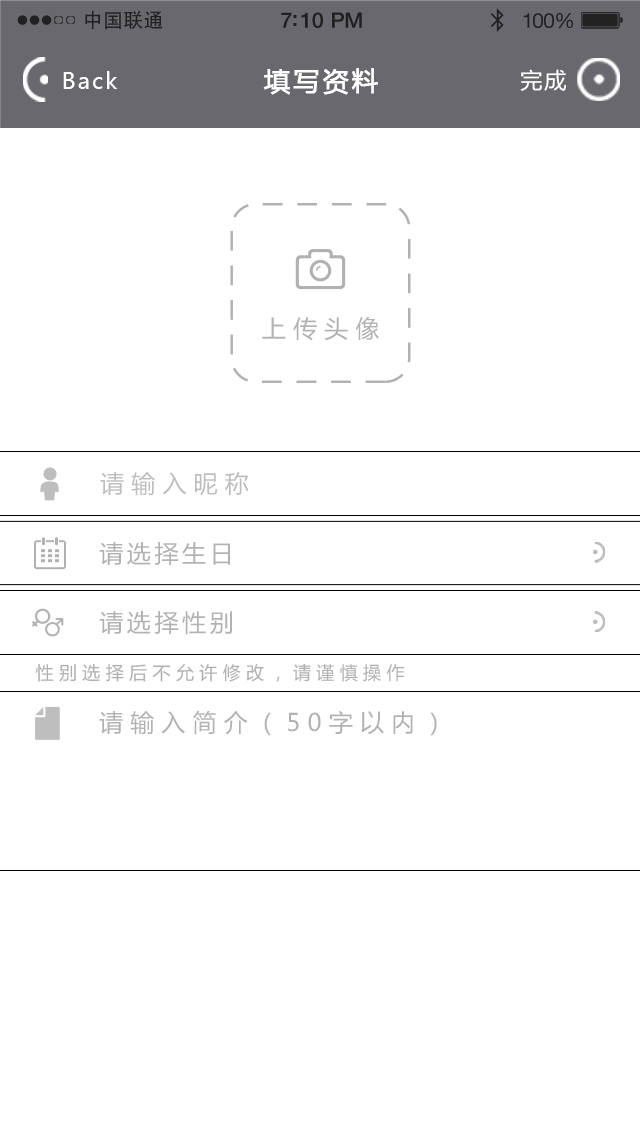
<style>
.page{position:relative;width:640px;height:1136px;background:#ffffff}
.page>*{position:absolute;margin:0}
.t1{font:19.7px "AdobeHeitiStd-Regular";letter-spacing:0.02em;color:#212121}
.t2{font:21.4px "HelveticaNeue-Medium";letter-spacing:-0.02em;color:#212121}
.t3{font:20.6px "HelveticaNeue";letter-spacing:-0.02em;color:#212121}
.t4{font:22px "MicrosoftYaHei";letter-spacing:0.1em;color:#ffffff}
.t5{font:26px "MicrosoftYaHei";letter-spacing:0.1em;color:#ffffff;font-weight:bold}
.t6{font:24px "MicrosoftYaHei";letter-spacing:0.3em;color:#b2b2b2}
.t7{font:24px "MicrosoftYaHei";letter-spacing:0.3em;color:#bebebe}
.t8{font:24px "MicrosoftYaHei";letter-spacing:0.15em;color:#b2b2b2}
.t9{font:18px "MicrosoftYaHei";letter-spacing:0.3em;color:#b1b1b1}
</style>
<div class="page">
<p class="t1" style="left:85px;top:10px;width:78px;height:20px">中国联通</p>
<p class="t2" style="left:281px;top:12px;width:81px;height:16px">7:10 PM</p>
<p class="t3" style="left:523px;top:13px;width:50px;height:16px">100%</p>
<p class="t4" style="left:63px;top:71px;width:55px;height:18px">Back</p>
<p class="t5" style="left:263px;top:68px;width:115px;height:27px">填写资料</p>
<p class="t4" style="left:520px;top:69px;width:46px;height:22px">完成</p>
<p class="t6" style="left:262px;top:317px;width:117px;height:24px">上传头像</p>
<p class="t7" style="left:100px;top:472px;width:149px;height:24px">请输入昵称</p>
<p class="t8" style="left:99px;top:542px;width:131px;height:23px">请选择生日</p>
<p class="t8" style="left:99px;top:611px;width:133px;height:24px">请选择性别</p>
<p class="t9" style="left:35px;top:663px;width:370px;height:19px">性别选择后不允许修改，请谨慎操作</p>
<p class="t6" style="left:99px;top:710px;width:338px;height:26px">请输入简介（50字以内）</p>
</div>
